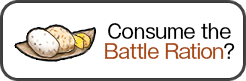
<style>
.page{position:relative;width:246px;height:81px;background:#ffffff}
.page>*{position:absolute;margin:0}
.t1{font:20px/20px "GothicMB101Pro-Regular";letter-spacing:-0.04em;color:#a84910}
.t2{font:20px/20px "GothicMB101Pro-Regular";letter-spacing:-0.04em;color:#000000}
</style>
<div class="page">
<p class="t1" style="left:105px;top:23px;width:130px;height:36px;text-align:center"><span class="t2">Consume the<br></span>Battle Ration<span class="t2">?</span></p>
</div>
